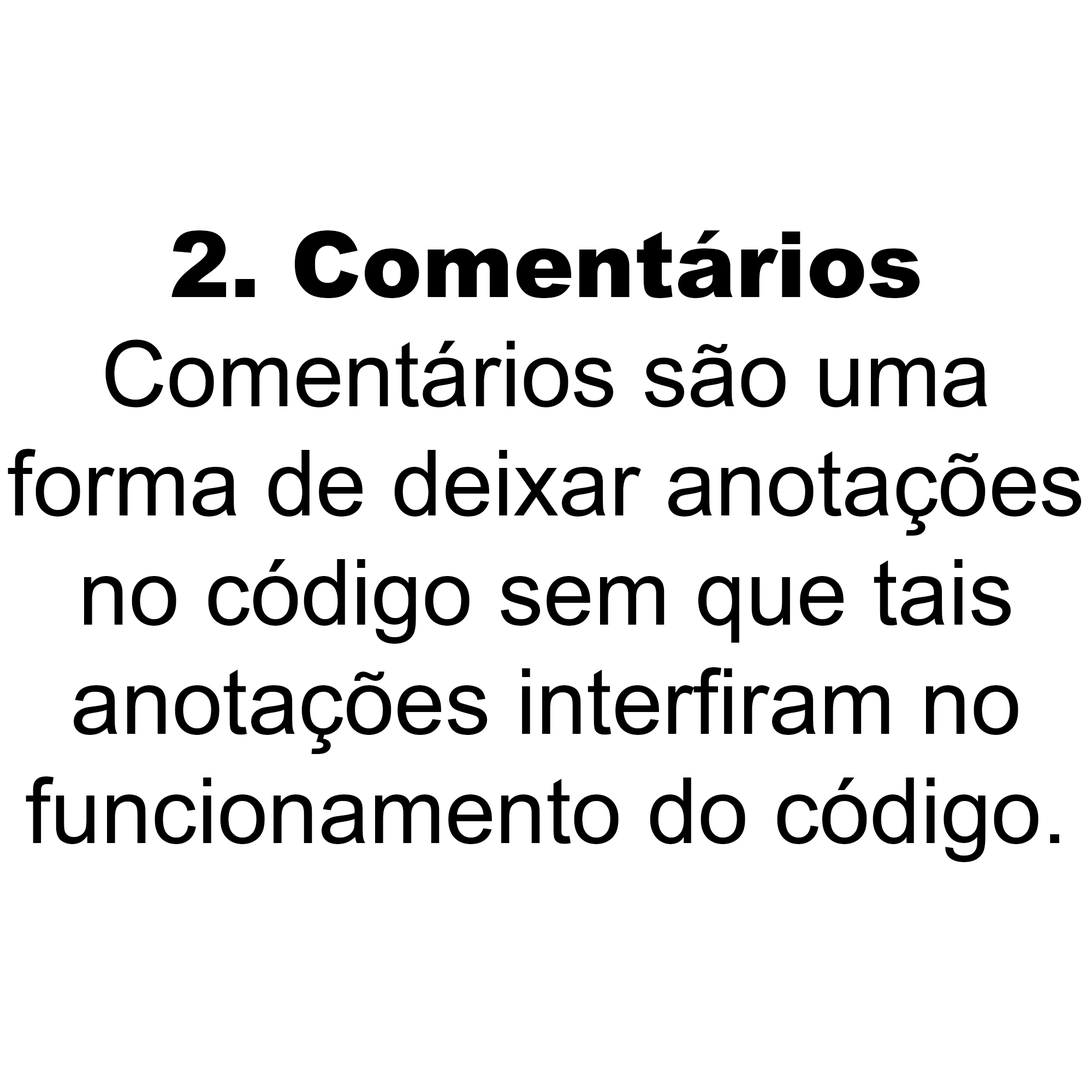
<style>
.page{position:relative;width:1092px;height:1092px;background:#ffffff}
.page>*{position:absolute;margin:0}
.t1{font:91px "ArialMT";color:#000000}
.t2{font:91px "Arial-Black";color:#000000}
</style>
<div class="page">
<p class="t1" style="left:8px;top:230px;width:1074px;height:632px;text-align:center"><span class="t2">2. Comentários<br></span>Comentários são uma<br>forma de deixar anotações<br>no código sem que tais<br>anotações interfiram no<br>funcionamento do código.</p>
</div>
